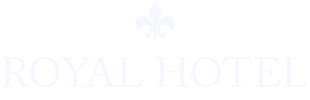
<style>
.page{position:relative;width:310px;height:100px;background:#ffffff}
.page>*{position:absolute;margin:0}
.t1{font:41.7px "ACaslonPro-Regular";color:#f5f7ff}
</style>
<div class="page">
<p class="t1" style="left:2px;top:55px;width:306px;height:32px">ROYAL HOTEL</p>
</div>
